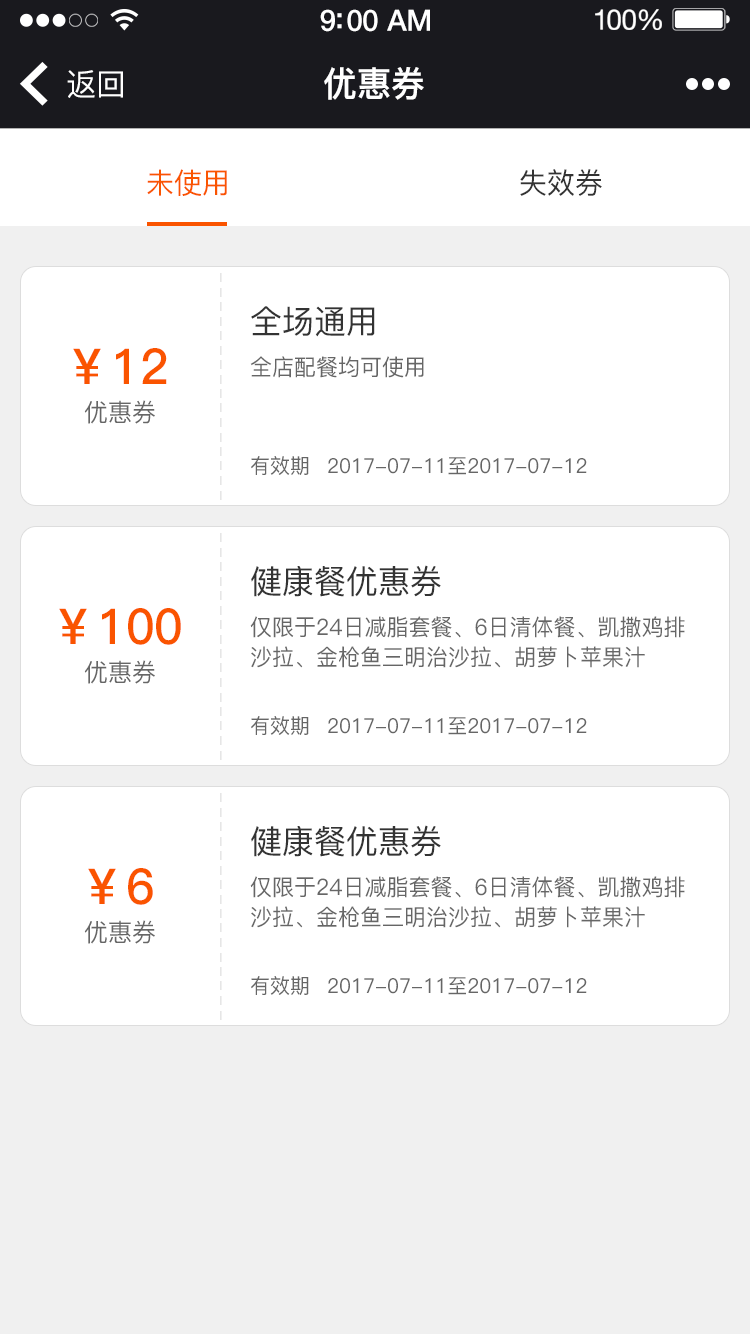
<style>
.page{position:relative;width:750px;height:1334px;background:#ffffff}
.page>*{position:absolute;margin:0}
.t1{font:29.5px "HelveticaNeue-Medium";letter-spacing:-0.02em;color:#ffffff}
.t2{font:28.3px "HelveticaNeue";letter-spacing:-0.02em;color:#ffffff}
.t3{font:30.9px "PingFang-SC-Medium";color:#ffffff;scale:0.97 1}
.t4{font:35px "PingFang-SC-Heavy";color:#ffffff;scale:0.97 1}
.t5{font:28.8px "PingFang-SC-Medium";color:#fa5400}
.t6{font:28.8px "PingFang-SC-Medium";color:#333333}
.t7{font:18.6px "PingFang-SC-Medium";letter-spacing:0.2em;color:#dddddd;scale:0.97 1}
.t8{font:33px "PingFang-SC-Medium";color:#333333}
.t9{font:49.4px "PingFang-SC-Bold";color:#fa5400}
.t10{font:22.7px "PingFang-SC-Medium";color:#666666}
.t11{font:24.7px "PingFang-SC-Medium";color:#666666}
.t12{font:20.6px "PingFang-SC-Medium";color:#666666}
</style>
<div class="page">
<p class="t1" style="left:320px;top:9px;width:110px;height:23px">9:00 AM</p>
<p class="t2" style="left:595px;top:9px;width:67px;height:21px">100%</p>
<p class="t3" style="left:67px;top:70px;width:56px;height:28px">返回</p>
<p class="t4" style="left:324px;top:67px;width:100px;height:33px">优惠券</p>
<p class="t5" style="left:147px;top:169px;width:80px;height:27px">未使用</p>
<p class="t6" style="left:520px;top:169px;width:82px;height:27px">失效券</p>
<p class="t7" style="left:220px;top:273px;width:2px;height:227px;rotate:90deg">----------------</p>
<p class="t8" style="left:251px;top:306px;width:124px;height:31px">全场通用</p>
<p class="t9" style="left:73px;top:348px;width:94px;height:36px">￥12</p>
<p class="t10" style="left:250px;top:356px;width:174px;height:22px">全店配餐均可使用</p>
<p class="t11" style="left:84px;top:400px;width:71px;height:24px">优惠券</p>
<p class="t12" style="left:251px;top:456px;width:58px;height:19px">有效期</p>
<p class="t12" style="left:328px;top:457px;width:259px;height:18px">2017-07-11至2017-07-12</p>
<p class="t7" style="left:220px;top:533px;width:2px;height:227px;rotate:90deg">----------------</p>
<p class="t8" style="left:251px;top:565px;width:190px;height:32px">健康餐优惠券</p>
<p class="t9" style="left:59px;top:608px;width:122px;height:37px">￥100</p>
<p class="t10" style="left:250px;top:616px;width:435px;height:52px">仅限于24日减脂套餐、6日清体餐、凯撒鸡排<br>沙拉、金枪鱼三明治沙拉、胡萝卜苹果汁</p>
<p class="t11" style="left:84px;top:660px;width:71px;height:24px">优惠券</p>
<p class="t12" style="left:251px;top:716px;width:58px;height:19px">有效期</p>
<p class="t12" style="left:328px;top:717px;width:259px;height:18px">2017-07-11至2017-07-12</p>
<p class="t7" style="left:220px;top:793px;width:2px;height:227px;rotate:90deg">----------------</p>
<p class="t8" style="left:251px;top:825px;width:190px;height:32px">健康餐优惠券</p>
<p class="t9" style="left:88px;top:868px;width:65px;height:37px">￥6</p>
<p class="t10" style="left:250px;top:876px;width:435px;height:52px">仅限于24日减脂套餐、6日清体餐、凯撒鸡排<br>沙拉、金枪鱼三明治沙拉、胡萝卜苹果汁</p>
<p class="t11" style="left:84px;top:920px;width:71px;height:24px">优惠券</p>
<p class="t12" style="left:251px;top:976px;width:58px;height:19px">有效期</p>
<p class="t12" style="left:328px;top:977px;width:259px;height:18px">2017-07-11至2017-07-12</p>
</div>
